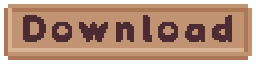
<style>
.page{position:relative;width:256px;height:64px;background:#c09473}
.page>*{position:absolute;margin:0}
.t1{font:36px "NicoPaint-Regular";letter-spacing:0.1em;color:#4d2b32}
</style>
<div class="page">
<p class="t1" style="left:23px;top:15px;width:209px;height:27px">Download</p>
</div>
